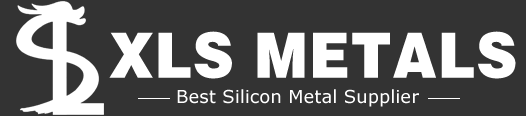
<style>
.page{position:relative;width:526px;height:116px;background:#333333}
.page>*{position:absolute;margin:0}
.t1{font:62.6px "FZCCHJW--GB1-0";letter-spacing:0.015em;color:#ffffff;scale:0.91 1}
.t2{font:18px "MSReferenceSansSerif";letter-spacing:0.005em;color:#ffffff}
</style>
<div class="page">
<p class="t1" style="left:109px;top:31px;width:407px;height:48px">XLS METALS</p>
<p class="t2" style="left:177px;top:89px;width:242px;height:18px">Best Silicon Metal Supplier</p>
</div>
